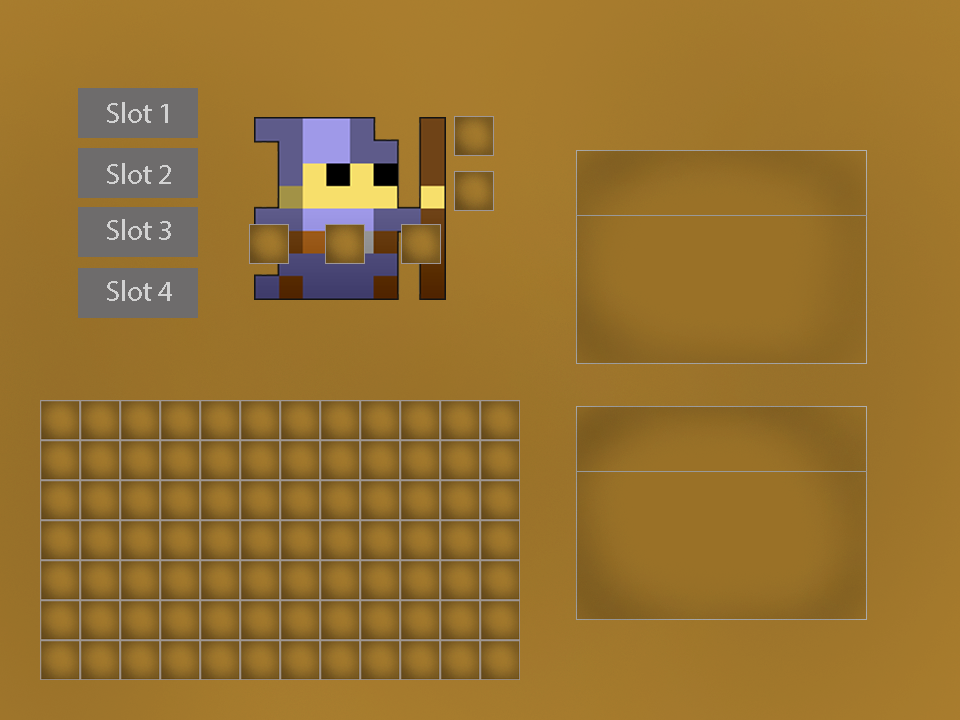
<style>
.page{position:relative;width:960px;height:720px}
.page>*{position:absolute;margin:0}
.t1{font:29.2px "MyriadPro-Regular";color:#d2d2d2}
.t2{font:125px "MyriadPro-Regular";color:#ffffff}
</style>
<div class="page">
<p class="t1" style="left:107px;top:102px;width:61px;height:21px;text-align:center">Slot 1<br><span class="t2">hERO</span></p>
<p class="t1" style="left:107px;top:163px;width:64px;height:21px;text-align:center">Slot 2<br><span class="t2">hERO</span></p>
<p class="t1" style="left:107px;top:219px;width:64px;height:21px;text-align:center">Slot 3<br><span class="t2">hERO</span></p>
<p class="t1" style="left:107px;top:280px;width:65px;height:21px;text-align:center">Slot 4<br><span class="t2">hERO</span></p>
</div>
